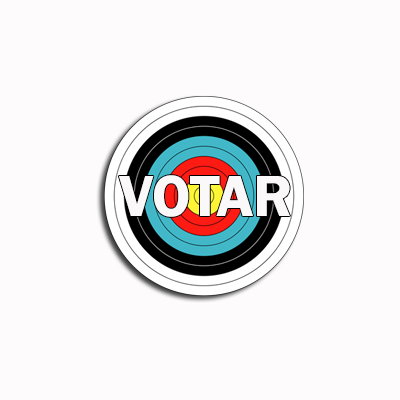
<style>
.page{position:relative;width:400px;height:400px;background:#fdfbfc}
.page>*{position:absolute;margin:0}
.t1{font:60px "FranklinGothic-Demi";color:#faf8f8}
</style>
<div class="page">
<p class="t1" style="left:119px;top:175px;width:171px;height:42px">VOTAR</p>
</div>
